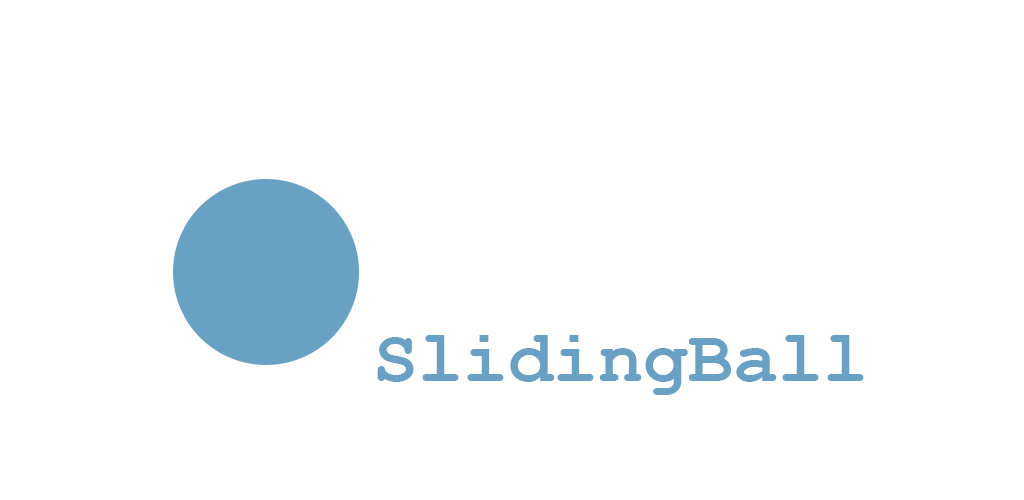
<style>
.page{position:relative;width:1024px;height:500px;background:#ffffff}
.page>*{position:absolute;margin:0}
.t1{font:75px "CourierNewPS-BoldMT";color:#69a1c4}
</style>
<div class="page">
<p class="t1" style="left:377px;top:335px;width:487px;height:60px">SlidingBall</p>
</div>
